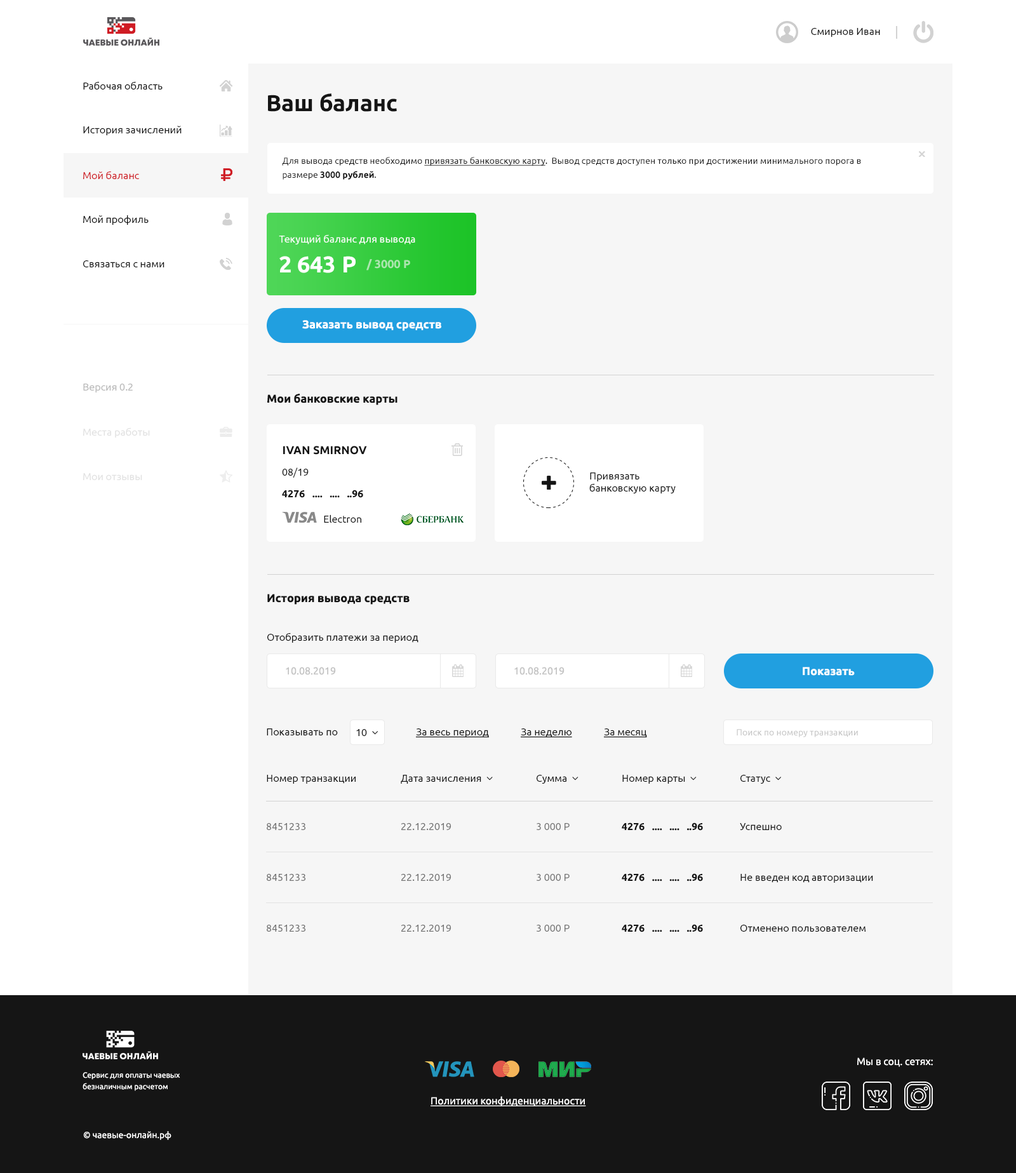
<style>
.page{position:relative;width:1016px;height:1173px;background:#f6f6f6}
.page>*{position:absolute;margin:0}
.t1{font:10.2px "Ubuntu-Regular";color:#151515}
.t2{font:22.9px "Ubuntu-Bold";color:#151515}
.t3{font:8.9px/14px "Ubuntu-Regular";color:#151515}
.t4{font:8.9px/14px "Ubuntu-Regular";color:#151515;text-decoration:underline}
.t5{font:8.9px/14px "Ubuntu-Bold";color:#151515}
.t6{font:10.2px "Ubuntu-Regular";color:#cf1c24}
.t7{font:10.2px "Ubuntu-Regular";color:#ffffff}
.t8{font:22.9px "Ubuntu-Bold";color:#ffffff}
.t9{font:11.4px "Ubuntu-Bold";color:#ade6af}
.t10{font:11.4px "Ubuntu-Bold";color:#ffffff}
.t11{font:10.2px "Ubuntu-Regular";color:#b8b8b8}
.t12{font:11.4px "Ubuntu-Bold";color:#151515}
.t13{font:10.2px "Ubuntu-Regular";color:#e1e1e1}
.t14{font:10.2px "Ubuntu-Bold";color:#151515}
.t15{font:10.2px "Ubuntu-Regular";color:#c4c4c4}
.t16{font:10.2px "Ubuntu-Regular";color:#151515;text-decoration:underline}
.t17{font:8.9px "Ubuntu-Regular";color:#c4c4c4}
.t18{font:10.2px "Ubuntu-Regular";color:#717171}
.t19{font:10.2px "Ubuntu-Regular";color:#727272}
.t20{font:7.6px/5.7px "Ubuntu-Regular";color:#ffffff}
.t21{font:10.2px "Ubuntu-Regular";color:#ffffff;text-decoration:underline}
.t22{font:8.9px "Ubuntu-Regular";color:#ffffff}
</style>
<div class="page">
<p class="t1" style="left:811px;top:28px;width:69px;height:9px">Смирнов Иван</p>
<p class="t1" style="left:83px;top:81px;width:80px;height:9px">Рабочая область</p>
<p class="t2" style="left:268px;top:93px;width:129px;height:19px">Ваш баланс</p>
<p class="t1" style="left:83px;top:126px;width:99px;height:9px">История зачислений</p>
<p class="t3" style="left:282px;top:157px;width:579px;height:23px">Для вывода средств необходимо <span class="t4">привязать банковскую карту</span>.  Вывод средств доступен только при достижении минимального порога в<br>размере <span class="t5">3000 рублей</span>.</p>
<p class="t6" style="left:83px;top:171px;width:56px;height:8px">Мой баланс</p>
<p class="t1" style="left:83px;top:215px;width:66px;height:10px">Мой профиль</p>
<p class="t7" style="left:279px;top:234px;width:136px;height:11px">Текущий баланс для вывода</p>
<p class="t8" style="left:279px;top:256px;width:77px;height:17px">2 643 Р</p>
<p class="t1" style="left:83px;top:260px;width:82px;height:7px">Связаться с нами</p>
<p class="t9" style="left:367px;top:259px;width:43px;height:12px">/ 3000 Р</p>
<p class="t10" style="left:302px;top:320px;width:139px;height:11px">Заказать вывод средств</p>
<p class="t11" style="left:83px;top:384px;width:50px;height:9px">Версия 0.2</p>
<p class="t12" style="left:267px;top:394px;width:131px;height:11px">Мои банковские карты</p>
<p class="t13" style="left:83px;top:428px;width:67px;height:10px">Места работы</p>
<p class="t12" style="left:283px;top:446px;width:84px;height:9px">IVAN SMIRNOV</p>
<p class="t13" style="left:83px;top:473px;width:59px;height:7px">Мои отзывы</p>
<p class="t1" style="left:282px;top:468px;width:27px;height:10px">08/19</p>
<p class="t1" style="left:589px;top:473px;width:87px;height:21px">Привязать<br>банковскую карту</p>
<p class="t14" style="left:282px;top:490px;width:81px;height:8px">4276   ....   ....   ..96</p>
<p class="t1" style="left:324px;top:515px;width:37px;height:8px">Electron</p>
<p class="t12" style="left:267px;top:594px;width:143px;height:11px">История вывода средств</p>
<p class="t1" style="left:267px;top:633px;width:152px;height:10px">Отобразить платежи за период</p>
<p class="t15" style="left:286px;top:667px;width:50px;height:8px">10.08.2019</p>
<p class="t15" style="left:515px;top:667px;width:50px;height:8px">10.08.2019</p>
<p class="t10" style="left:803px;top:667px;width:52px;height:9px">Показать</p>
<p class="t1" style="left:267px;top:729px;width:71px;height:7px">Показывать по</p>
<p class="t16" style="left:416px;top:729px;width:73px;height:8px">За весь период</p>
<p class="t16" style="left:521px;top:729px;width:51px;height:8px">За неделю</p>
<p class="t16" style="left:604px;top:729px;width:43px;height:8px">За месяц</p>
<p class="t17" style="left:737px;top:729px;width:121px;height:8px">Поиск по номеру транзакции</p>
<p class="t1" style="left:267px;top:775px;width:89px;height:9px">Номер транзакции</p>
<p class="t18" style="left:267px;top:823px;width:39px;height:7px">8451233</p>
<p class="t19" style="left:401px;top:823px;width:50px;height:7px">22.12.2019</p>
<p class="t19" style="left:537px;top:823px;width:33px;height:7px">3 000 Р</p>
<p class="t14" style="left:622px;top:823px;width:81px;height:8px">4276   ....   ....   ..96</p>
<p class="t1" style="left:740px;top:823px;width:42px;height:7px">Успешно</p>
<p class="t18" style="left:267px;top:874px;width:39px;height:7px">8451233</p>
<p class="t19" style="left:401px;top:874px;width:50px;height:7px">22.12.2019</p>
<p class="t19" style="left:537px;top:874px;width:33px;height:7px">3 000 Р</p>
<p class="t14" style="left:622px;top:873px;width:81px;height:9px">4276   ....   ....   ..96</p>
<p class="t1" style="left:741px;top:874px;width:132px;height:9px">Не введен код авторизации</p>
<p class="t18" style="left:267px;top:925px;width:39px;height:7px">8451233</p>
<p class="t19" style="left:401px;top:925px;width:50px;height:7px">22.12.2019</p>
<p class="t19" style="left:537px;top:925px;width:33px;height:7px">3 000 Р</p>
<p class="t14" style="left:622px;top:924px;width:81px;height:9px">4276   ....   ....   ..96</p>
<p class="t1" style="left:741px;top:925px;width:125px;height:7px">Отменено пользователем</p>
<p class="t7" style="left:858px;top:1058px;width:75px;height:9px">Мы в соц. сетях:</p>
<p class="t20" style="left:83px;top:1072px;width:97px;height:19px">Сервис для оплаты чаевых<br><br>безналичным расчетом</p>
<p class="t21" style="left:431px;top:1096px;width:155px;height:11px">Политики конфиденциальности</p>
<p class="t22" style="left:83px;top:1131px;width:89px;height:9px">© чаевые-онлайн.рф</p>
</div>
